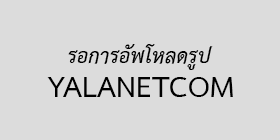
<style>
.page{position:relative;width:280px;height:140px;background:#dcdcdc}
.page>*{position:absolute;margin:0}
.t1{font:29.1px "THSarabunPSK-BoldItalic";color:#000000}
.t2{font:42.3px "THSarabunPSK-Bold";color:#000000}
</style>
<div class="page">
<p class="t1" style="left:68px;top:44px;width:145px;height:26px">รอการอัพโหลดรูป</p>
<p class="t2" style="left:47px;top:77px;width:186px;height:20px">YALANETCOM</p>
</div>
